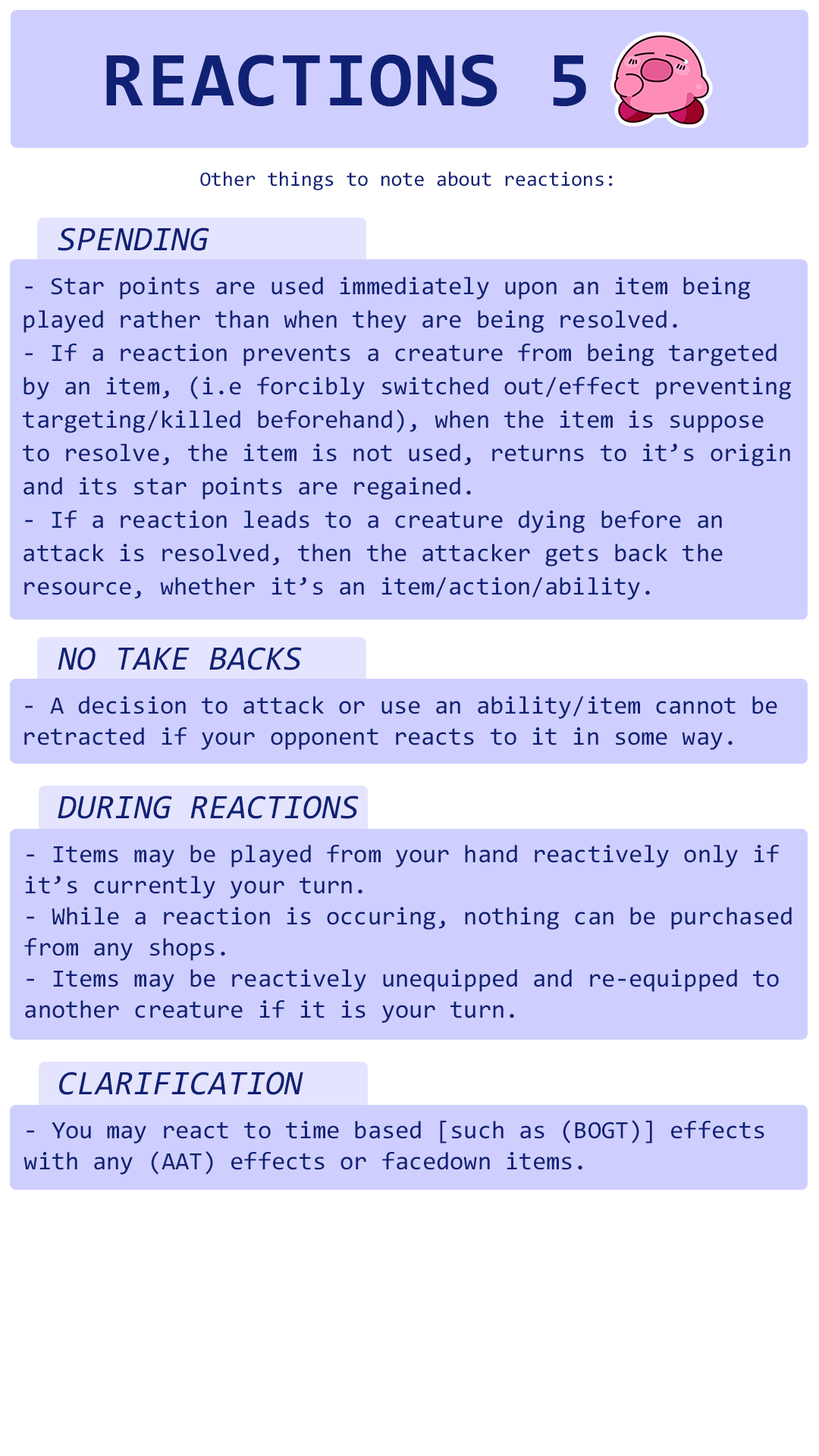
<style>
.page{position:relative;width:819px;height:1456px;background:#cfcfff}
.page>*{position:absolute;margin:0}
.t1{font:78.3px "Consolas-Bold";letter-spacing:0.02em;color:#102175}
.t2{font:20.5px "Consolas";color:#102175}
.t3{font:34.3px "Consolas-Italic";color:#102175}
.t4{font:25px/33.4px "Consolas";color:#102175}
.t5{font:25px/31.1px "Consolas";color:#102175}
</style>
<div class="page">
<p class="t1" style="left:106px;top:55px;width:480px;height:52px">REACTIONS 5</p>
<p class="t2" style="left:200px;top:171px;width:413px;height:19px">Other things to note about reactions:</p>
<p class="t3" style="left:58px;top:227px;width:151px;height:24px">SPENDING</p>
<p class="t4" style="left:23px;top:277px;width:768px;height:323px">- Star points are used immediately upon an item being played rather than when they are being resolved.<br>- If a reaction prevents a creature from being targeted by an item, (i.e forcibly switched out/effect preventing targeting/killed beforehand), when the item is suppose to resolve, the item is not used, returns to it’s origin and its star points are regained.<br>- If a reaction leads to a creature dying before an attack is resolved, then the attacker gets back the resource, whether it’s an item/action/ability.</p>
<p class="t3" style="left:58px;top:647px;width:244px;height:23px">NO TAKE BACKS</p>
<p class="t5" style="left:24px;top:696px;width:753px;height:54px">- A decision to attack or use an ability/item cannot be retracted if your opponent reacts to it in some way.</p>
<p class="t3" style="left:58px;top:795px;width:301px;height:24px">DURING REACTIONS</p>
<p class="t5" style="left:24px;top:845px;width:768px;height:178px">- Items may be played from your hand reactively only if it’s currently your turn.<br>- While a reaction is occuring, nothing can be purchased from any shops.<br>- Items may be reactively unequipped and re-equipped to another creature if it is your turn.</p>
<p class="t3" style="left:59px;top:1072px;width:244px;height:23px">CLARIFICATION</p>
<p class="t5" style="left:24px;top:1120px;width:740px;height:55px">- You may react to time based [such as (BOGT)] effects with any (AAT) effects or facedown items.</p>
</div>
